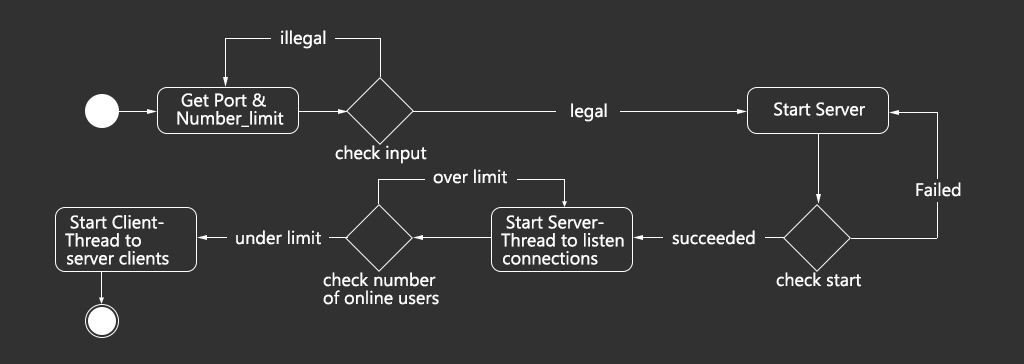
<style>
.page{position:relative;width:1024px;height:364px;background:#313131}
.page>*{position:absolute;margin:0}
.t1{font:18px "MicrosoftNewTaiLue";color:#ffffff}
.t2{font:18px/18px "MicrosoftNewTaiLue";color:#ffffff}
</style>
<div class="page">
<p class="t1" style="left:281px;top:30px;width:45px;height:19px">illegal</p>
<p class="t2" style="left:177px;top:93px;width:107px;height:34px">Get Port &amp; Number_limit</p>
<p class="t1" style="left:774px;top:102px;width:91px;height:14px">Start Server</p>
<p class="t1" style="left:571px;top:103px;width:36px;height:19px">legal</p>
<p class="t1" style="left:335px;top:145px;width:92px;height:19px">check input</p>
<p class="t1" style="left:433px;top:169px;width:74px;height:15px">over limit</p>
<p class="t1" style="left:916px;top:182px;width:45px;height:15px">Failed</p>
<p class="t2" style="left:65px;top:215px;width:104px;height:50px">Start ClientThread to server clients</p>
<p class="t2" style="left:501px;top:215px;width:123px;height:50px">Start ServerThread to listen connections</p>
<p class="t1" style="left:236px;top:230px;width:85px;height:15px">under limit</p>
<p class="t1" style="left:672px;top:230px;width:83px;height:15px">succeeded</p>
<p class="t2" style="left:323px;top:272px;width:116px;height:33px">check number<br>of online users</p>
<p class="t1" style="left:776px;top:272px;width:85px;height:15px">check start</p>
</div>
